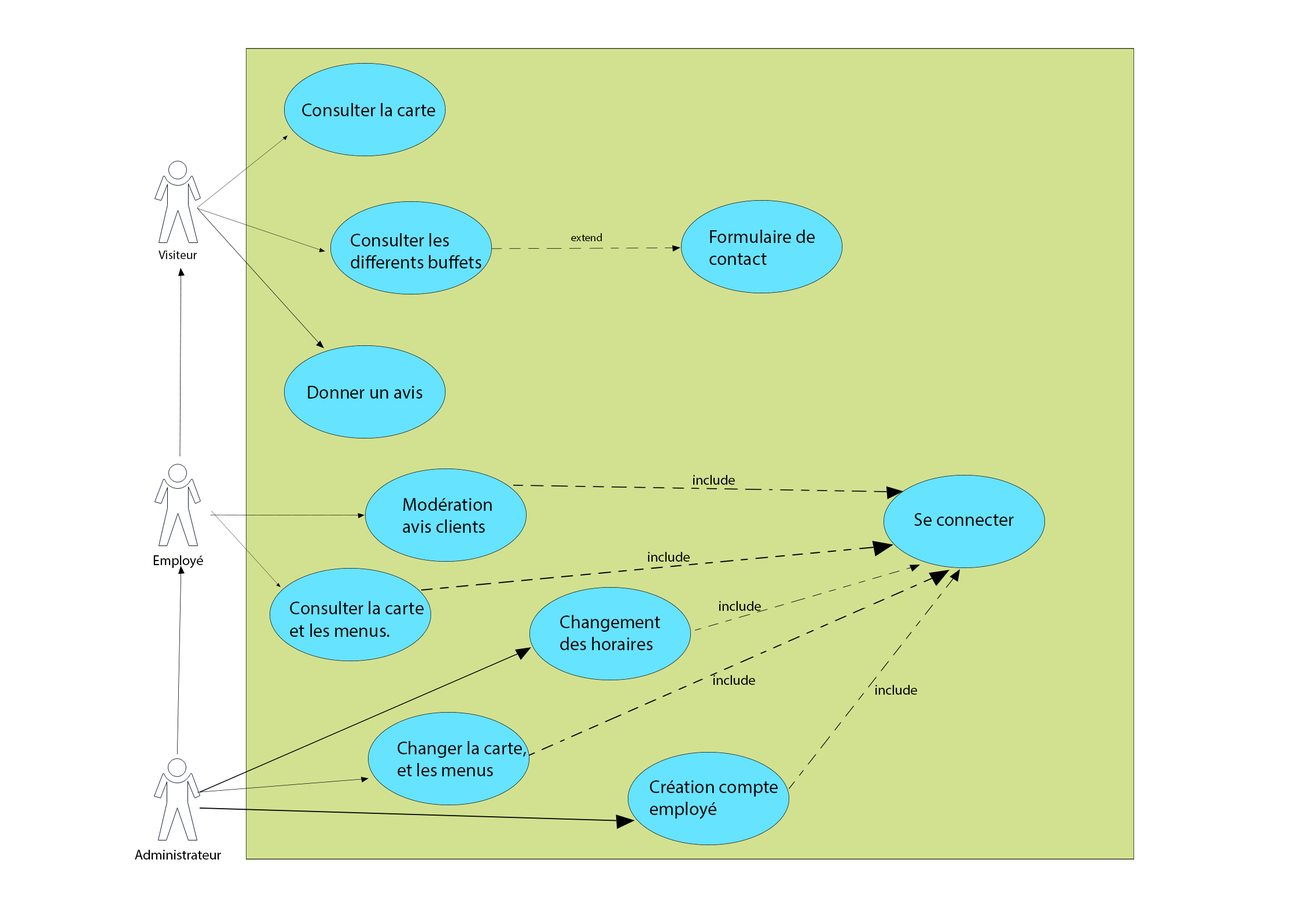
<style>
.page{position:relative;width:1299px;height:918px;background:#d2e190}
.page>*{position:absolute;margin:0}
.t1{font:18.5px "MyriadPro-Regular";color:#000000}
.t2{font:10.8px "MyriadPro-Regular";color:#000000}
.t3{font:12.3px "MyriadPro-Regular";color:#000000}
.t4{font:13.9px "MyriadPro-Regular";color:#000000}
</style>
<div class="page">
<p class="t1" style="left:302px;top:103px;width:133px;height:13px">Consulter la carte</p>
<p class="t1" style="left:351px;top:233px;width:130px;height:35px">Consulter les <br>differents buffets</p>
<p class="t2" style="left:571px;top:233px;width:31px;height:8px">extend</p>
<p class="t1" style="left:709px;top:230px;width:106px;height:35px">Formulaire de<br>contact</p>
<p class="t3" style="left:159px;top:251px;width:38px;height:8px">Visiteur</p>
<p class="t1" style="left:308px;top:386px;width:114px;height:13px">Donner un avis</p>
<p class="t4" style="left:693px;top:475px;width:42px;height:10px">include</p>
<p class="t1" style="left:403px;top:498px;width:89px;height:35px">Modération <br>avis clients</p>
<p class="t1" style="left:914px;top:513px;width:100px;height:13px">Se connecter</p>
<p class="t4" style="left:153px;top:555px;width:50px;height:13px">Employé</p>
<p class="t4" style="left:648px;top:552px;width:42px;height:10px">include</p>
<p class="t1" style="left:290px;top:601px;width:133px;height:36px">Consulter la carte <br>et les menus.</p>
<p class="t4" style="left:719px;top:601px;width:42px;height:10px">include</p>
<p class="t1" style="left:560px;top:615px;width:100px;height:35px">Changement <br>des horaires</p>
<p class="t4" style="left:713px;top:675px;width:42px;height:10px">include</p>
<p class="t4" style="left:875px;top:685px;width:42px;height:10px">include</p>
<p class="t1" style="left:397px;top:741px;width:129px;height:35px">Changer la carte, <br>et les menus</p>
<p class="t1" style="left:650px;top:780px;width:128px;height:39px">Création compte <br>employé</p>
<p class="t4" style="left:135px;top:850px;width:86px;height:10px">Administrateur</p>
</div>
